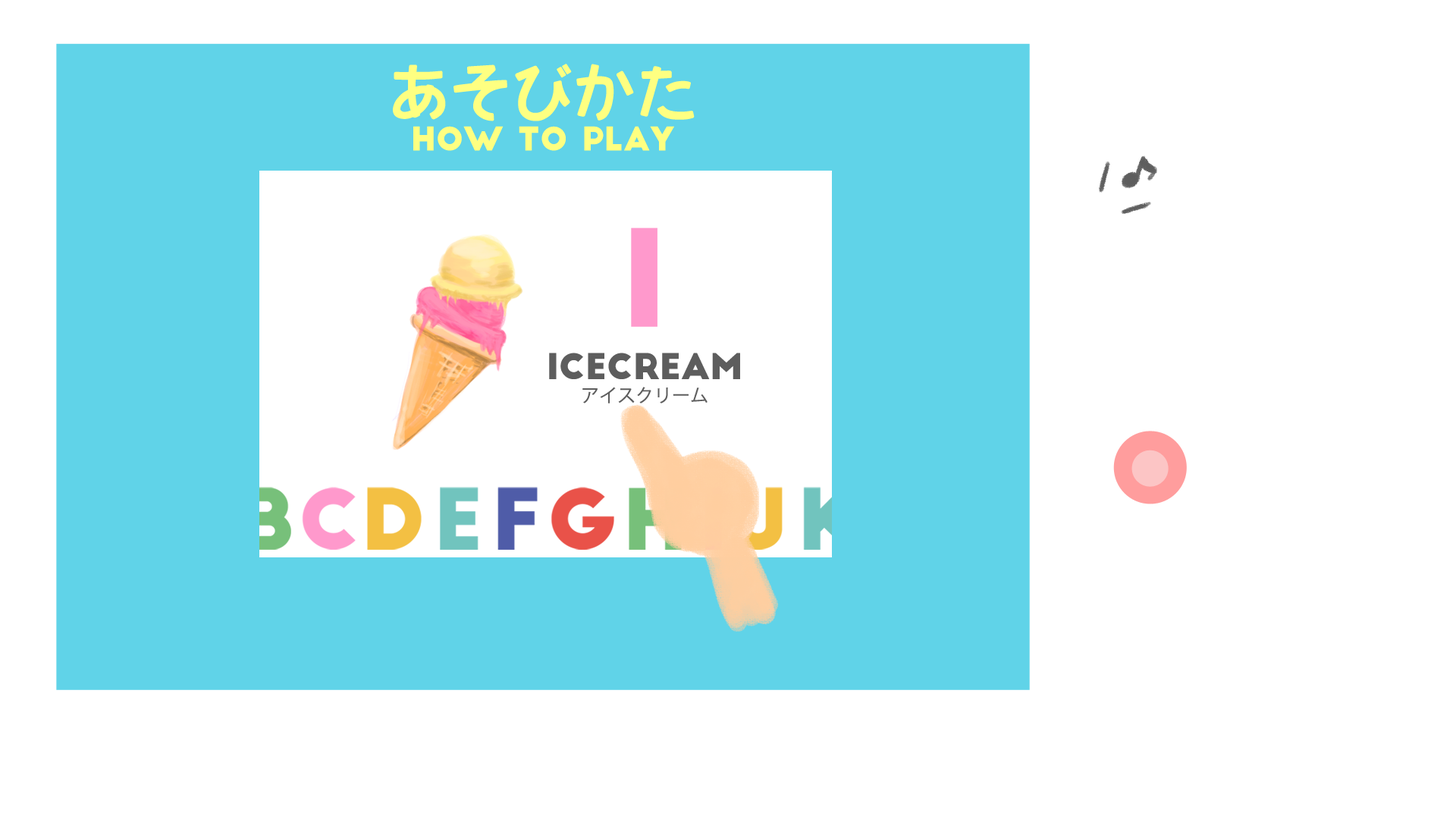
<style>
.page{position:relative;width:1456px;height:819px;background:#ffffff}
.page>*{position:absolute;margin:0}
.t1{font:31.7px/62.2px "BigJohn";color:#feff81}
.t2{font:62.2px/62.2px "JNRfont_p";color:#feff81}
.t3{font:34.7px/36.4px "BigJohn";color:#5d5d5d}
.t4{font:18.2px/36.4px "KozGoPr6N-Regular";color:#5d5d5d}
</style>
<div class="page">
<p class="t1" style="left:393px;top:64px;width:302px;height:87px;text-align:center"><span class="t2">あそびかた<br></span>HOW TO PLAY</p>
<p class="t3" style="left:549px;top:353px;width:191px;height:50px;text-align:center">ICECREAM<br><span class="t4">アイスクリーム</span></p>
</div>
